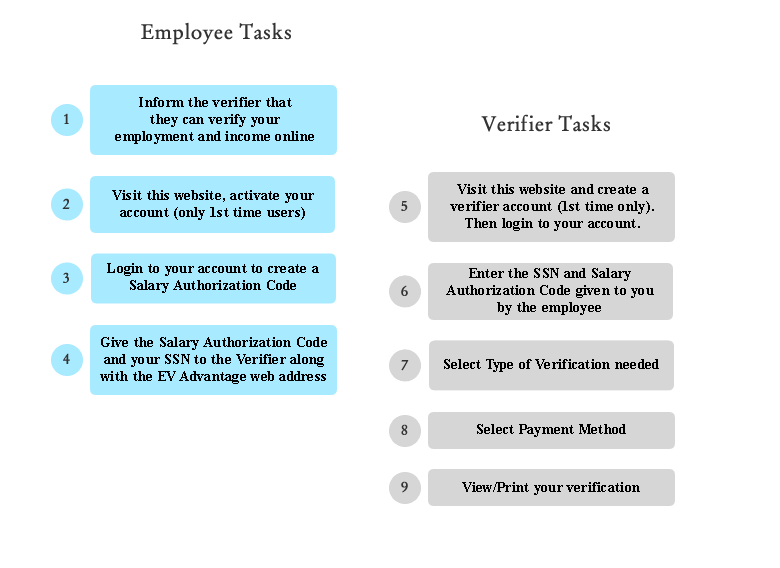
<style>
.page{position:relative;width:780px;height:568px;background:#ffffff}
.page>*{position:absolute;margin:0}
.t1{font:14px/17px "TimesNewRomanPS-BoldMT";letter-spacing:0.02em;color:#000000}
.t2{font:14px "TimesNewRomanPS-BoldMT";letter-spacing:0.02em;color:#000000}
</style>
<div class="page">
<p class="t1" style="left:115px;top:97px;width:199px;height:47px;text-align:center">Inform the verifier that<br>they can verify your<br>employment and income online</p>
<p class="t1" style="left:450px;top:184px;width:204px;height:47px;text-align:center">Visit this website and create a<br>verifier account (1st time only).<br>Then login to your account.</p>
<p class="t1" style="left:112px;top:190px;width:202px;height:30px;text-align:center">Visit this website, activate your<br>account (only 1st time users)</p>
<p class="t1" style="left:107px;top:263px;width:212px;height:30px;text-align:center">Login to your account to create a<br>Salary Authorization Code</p>
<p class="t1" style="left:446px;top:268px;width:208px;height:47px;text-align:center">Enter the SSN and Salary<br>Authorization Code given to you<br>by the employee</p>
<p class="t1" style="left:100px;top:337px;width:227px;height:47px;text-align:center">Give the Salary Authorization Code<br>and your SSN to the Verifier along<br>with the EV Advantage web address</p>
<p class="t2" style="left:444px;top:359px;width:215px;height:13px">Select Type of Verification needed</p>
<p class="t2" style="left:477px;top:424px;width:149px;height:13px">Select Payment Method</p>
<p class="t2" style="left:462px;top:482px;width:178px;height:13px">View/Print your verification</p>
</div>
